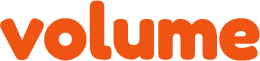
<style>
.page{position:relative;width:260px;height:61px;background:#ffffff}
.page>*{position:absolute;margin:0}
.t1{font:80px "Fredoka-Bold";letter-spacing:-0.005em;color:#f05413}
</style>
<div class="page">
<p class="t1" style="left:0px;top:0px;width:260px;height:61px">volume</p>
</div>
